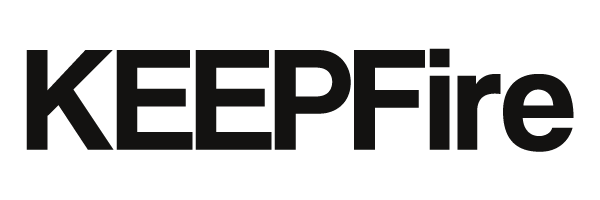
<style>
.page{position:relative;width:600px;height:200px;background:#ffffff}
.page>*{position:absolute;margin:0}
.t1{font:149.9px "CoolveticaRg-Regular";color:#131211}
</style>
<div class="page">
<p class="t1" style="left:26px;top:48px;width:548px;height:104px">KEEPFire</p>
</div>
